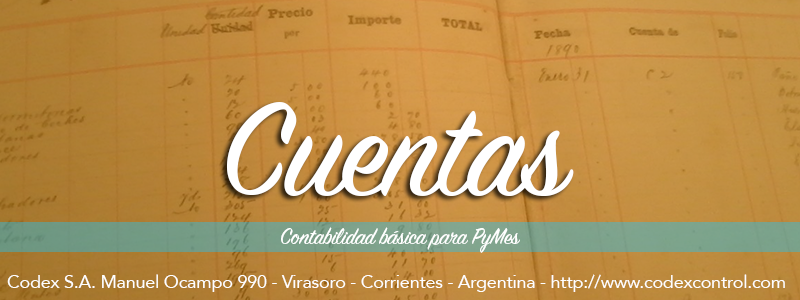
<style>
.page{position:relative;width:800px;height:300px}
.page>*{position:absolute;margin:0}
.t1{font:145.6px "SignPainter-HouseScript";letter-spacing:-0.02em;color:#ffffff}
.t2{font:24.6px "SignPainter-HouseScript";letter-spacing:-0.02em;color:#ffffff}
.t3{font:18.4px "Avenir-Roman";letter-spacing:-0.02em;color:#ffffff}
</style>
<div class="page">
<p class="t1" style="left:227px;top:102px;width:347px;height:95px">Cuentas</p>
<p class="t2" style="left:281px;top:227px;width:239px;height:26px">Contabilidad básica para PyMes</p>
<p class="t3" style="left:7px;top:274px;width:778px;height:18px">Codex S.A. Manuel Ocampo 990 - Virasoro - Corrientes - Argentina - http://www.codexcontrol.com</p>
</div>
